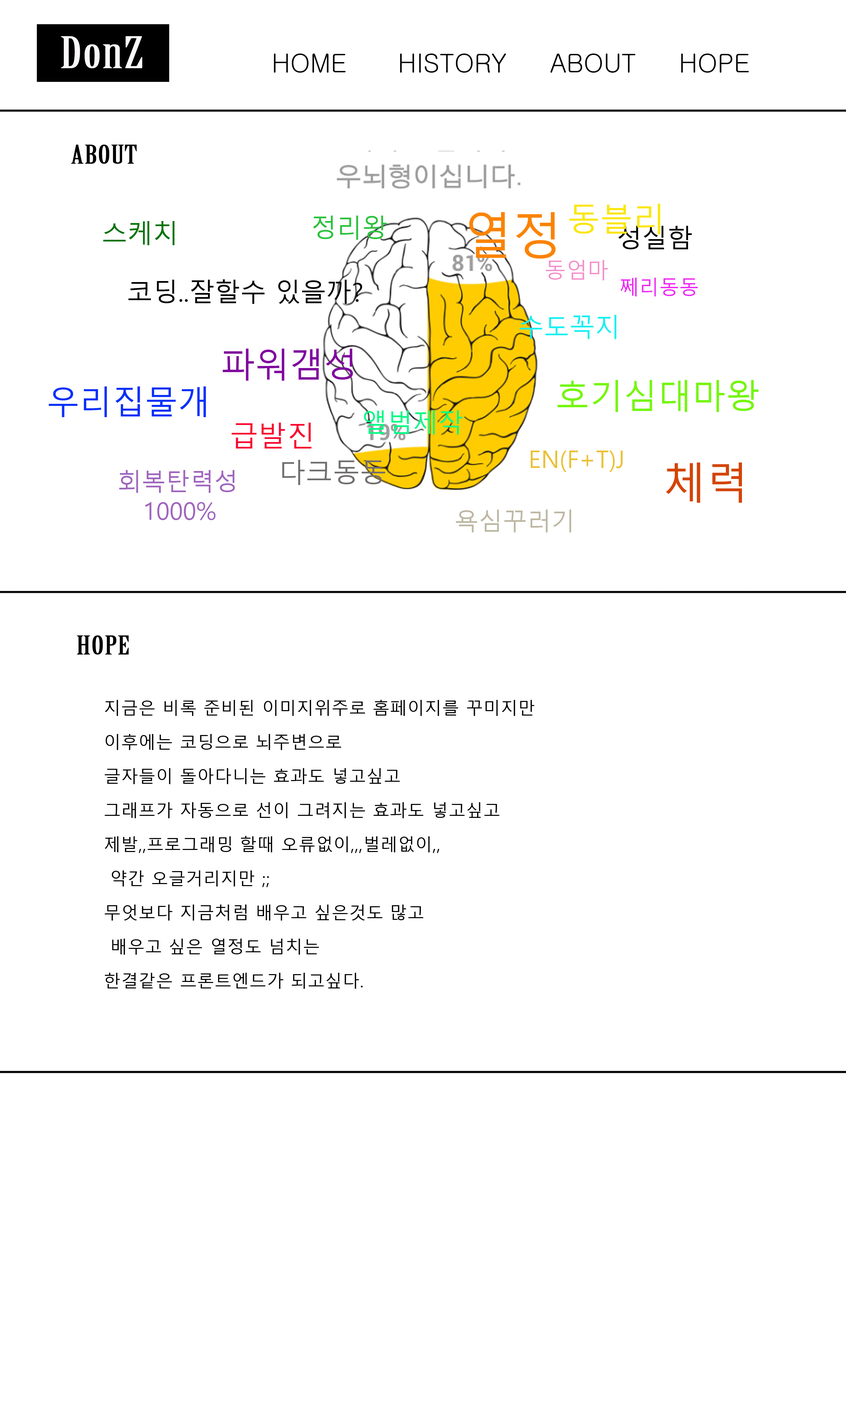
<style>
.page{position:relative;width:846px;height:1410px;background:#ffffff}
.page>*{position:absolute;margin:0}
.t1{font:42.6px "BirchStd";letter-spacing:0.02em;color:#fbf9f9;scale:1.5 1}
.t2{font:25.6px "Gulim";color:#000000}
.t3{font:25.6px "BirchStd";letter-spacing:0.02em;color:#000000;scale:1.5 1}
.t4{font:32.7px "MalgunGothic";color:#fae60c}
.t5{font:25.6px "MalgunGothic";color:#027207}
.t6{font:25.6px "MalgunGothic";color:#2bc23d}
.t7{font:49.7px "MalgunGothic";color:#fb8302}
.t8{font:25.6px "MalgunGothic";color:#000000}
.t9{font:21.3px "MalgunGothic";color:#f391cb}
.t10{font:19.9px "MalgunGothic";color:#ee2af5}
.t11{font:25.6px "MalgunGothic";color:#16eff2}
.t12{font:34.1px "MalgunGothic";color:#80069e}
.t13{font:32.7px "MalgunGothic";color:#0830f9}
.t14{font:34.1px "MalgunGothic";color:#74f60c}
.t15{font:25.6px "MalgunGothic";color:#05fa84}
.t16{font:28.4px "MalgunGothic";color:#f8072f}
.t17{font:27px "MalgunGothic";color:#726f6f}
.t18{font:24.2px "MalgunGothic";color:#e9c137}
.t19{font:24.2px "MalgunGothic";color:#9f66bd}
.t20{font:42.6px "MalgunGothic";color:#d34507}
.t21{font:24.2px "MalgunGothic";color:#bdb7a3}
.t22{font:17.1px/34.1px "MalgunGothic";letter-spacing:0.02em;color:#000000}
</style>
<div class="page">
<p class="t1" style="left:61px;top:36px;width:81px;height:33px">DonZ</p>
<p class="t2" style="left:274px;top:54px;width:475px;height:19px">HOME      HISTORY     ABOUT     HOPE</p>
<p class="t3" style="left:71px;top:145px;width:66px;height:19px">ABOUT</p>
<p class="t4" style="left:569px;top:204px;width:91px;height:30px">동블리</p>
<p class="t5" style="left:103px;top:221px;width:72px;height:24px">스케치</p>
<p class="t6" style="left:313px;top:216px;width:74px;height:24px">정리왕</p>
<p class="t7" style="left:469px;top:212px;width:87px;height:47px">열정</p>
<p class="t8" style="left:618px;top:226px;width:74px;height:23px">성실함</p>
<p class="t9" style="left:546px;top:260px;width:62px;height:20px">동엄마</p>
<p class="t8" style="left:128px;top:279px;width:234px;height:25px">코딩..잘할수 있을까?</p>
<p class="t10" style="left:620px;top:278px;width:78px;height:18px">쩨리동동</p>
<p class="t11" style="left:519px;top:315px;width:97px;height:24px">수도꼭지</p>
<p class="t12" style="left:223px;top:349px;width:130px;height:32px">파워갬성</p>
<p class="t13" style="left:49px;top:386px;width:157px;height:31px">우리집물개</p>
<p class="t14" style="left:557px;top:380px;width:201px;height:32px">호기심대마왕</p>
<p class="t15" style="left:364px;top:410px;width:98px;height:24px">앨범제작</p>
<p class="t16" style="left:232px;top:423px;width:79px;height:25px">급발진</p>
<p class="t17" style="left:282px;top:460px;width:103px;height:25px">다크동동</p>
<p class="t18" style="left:530px;top:451px;width:93px;height:21px">EN(F+T)J</p>
<p class="t19" style="left:119px;top:470px;width:116px;height:50px">회복탄력성<br>   1000%</p>
<p class="t20" style="left:666px;top:462px;width:76px;height:41px">체력</p>
<p class="t21" style="left:456px;top:510px;width:115px;height:22px">욕심꾸러기</p>
<p class="t3" style="left:77px;top:635px;width:52px;height:19px">HOPE</p>
<p class="t22" style="left:105px;top:700px;width:429px;height:289px">지금은 비록 준비된 이미지위주로 홈페이지를 꾸미지만<br>이후에는 코딩으로 뇌주변으로 <br>글자들이 돌아다니는 효과도 넣고싶고<br>그래프가 자동으로 선이 그려지는 효과도 넣고싶고<br>제발,,프로그래밍 할때 오류없이,,,벌레없이,,<br> 약간 오글거리지만 ;;<br>무엇보다 지금처럼 배우고 싶은것도 많고<br> 배우고 싶은 열정도 넘치는<br>한결같은 프론트엔드가 되고싶다.</p>
</div>
